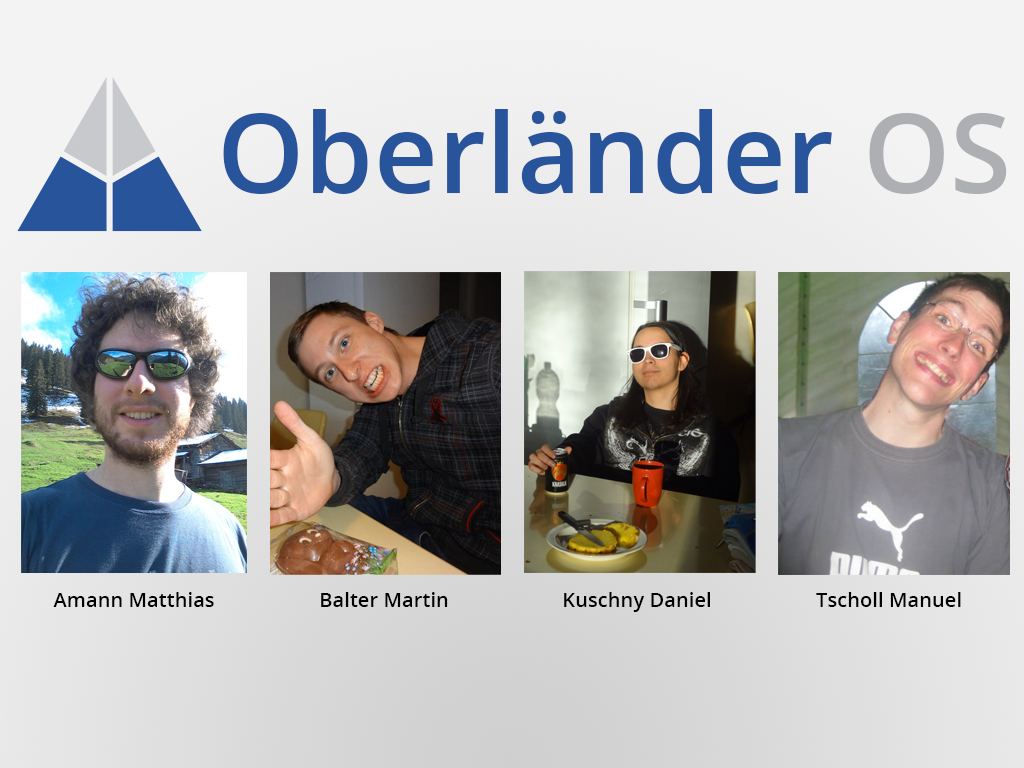
<style>
.page{position:relative;width:1024px;height:768px}
.page>*{position:absolute;margin:0}
.t1{font:111.3px "OpenSans-Semibold";color:#28549c}
.t2{font:111.3px "OpenSans-Semibold";color:#adafb3}
.t3{font:20px "OpenSans-Semibold";letter-spacing:0.005em;color:#000000}
</style>
<div class="page">
<p class="t1" style="left:223px;top:109px;width:784px;height:85px">Oberländer <span class="t2">OS</span></p>
<p class="t3" style="left:53px;top:592px;width:161px;height:15px">Amann Matthias</p>
<p class="t3" style="left:321px;top:592px;width:127px;height:15px">Balter Martin</p>
<p class="t3" style="left:564px;top:592px;width:146px;height:20px">Kuschny Daniel</p>
<p class="t3" style="left:816px;top:592px;width:145px;height:15px">Tscholl Manuel</p>
</div>
